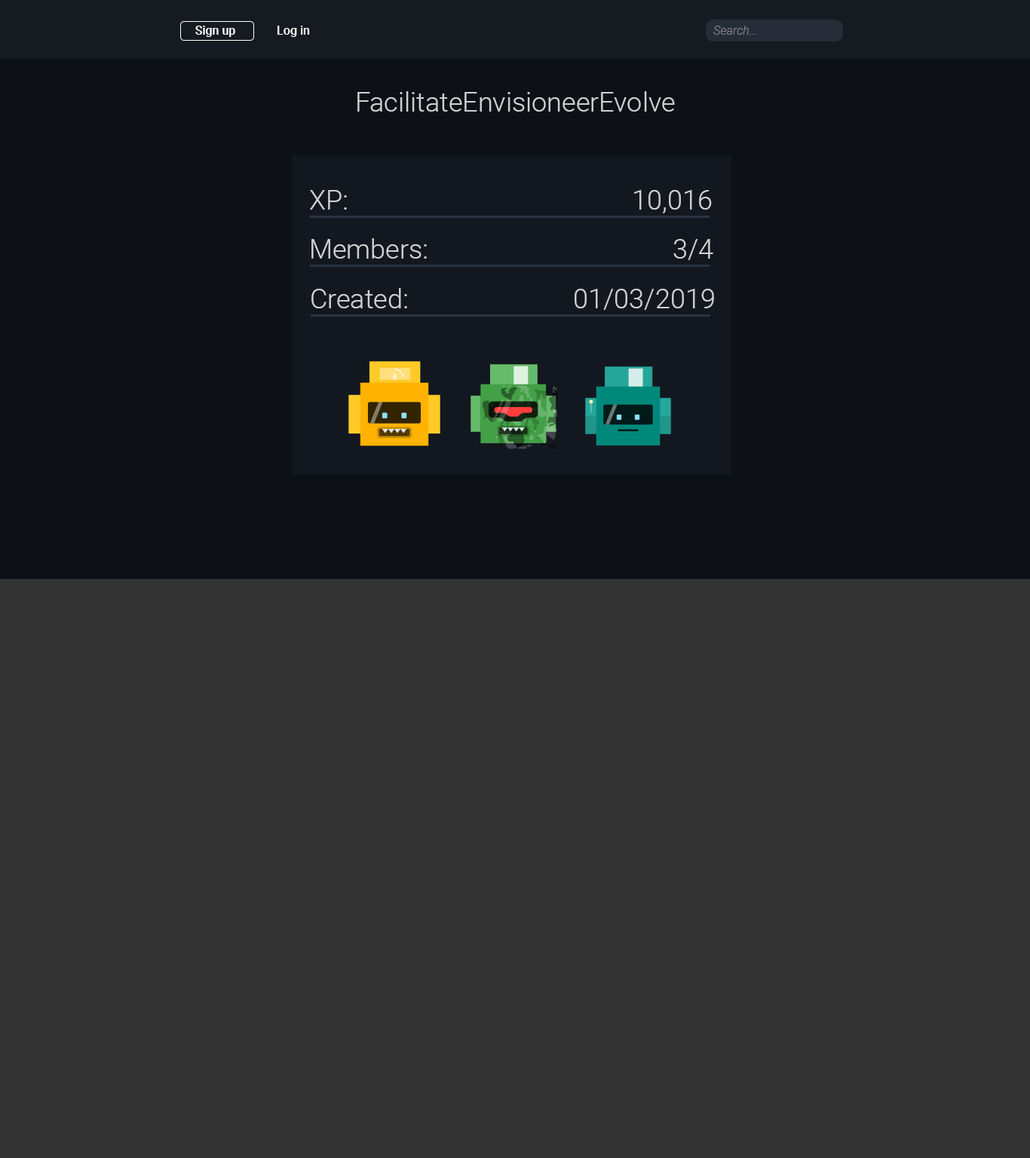
<style>
.page{position:relative;width:1030px;height:1158px;background:#333333}
.page>*{position:absolute;margin:0}
.t1{font:12.1px "Roboto-Medium";color:#ffffff}
.t2{font:12.1px "Roboto-LightItalic";color:#808283}
.t3{font:27.1px "Roboto-Light";color:#d0d1d2}
</style>
<div class="page">
<p class="t1" style="left:195px;top:26px;width:40px;height:11px">Sign up</p>
<p class="t1" style="left:277px;top:26px;width:33px;height:11px">Log in</p>
<p class="t2" style="left:713px;top:26px;width:44px;height:9px">Search...</p>
<p class="t3" style="left:357px;top:91px;width:318px;height:21px">FacilitateEnvisioneerEvolve</p>
<p class="t3" style="left:310px;top:190px;width:402px;height:23px">XP:                                           10,016</p>
<p class="t3" style="left:311px;top:238px;width:402px;height:22px">Members:                                     3/4</p>
<p class="t3" style="left:311px;top:288px;width:403px;height:22px">Created:                         01/03/2019</p>
</div>
